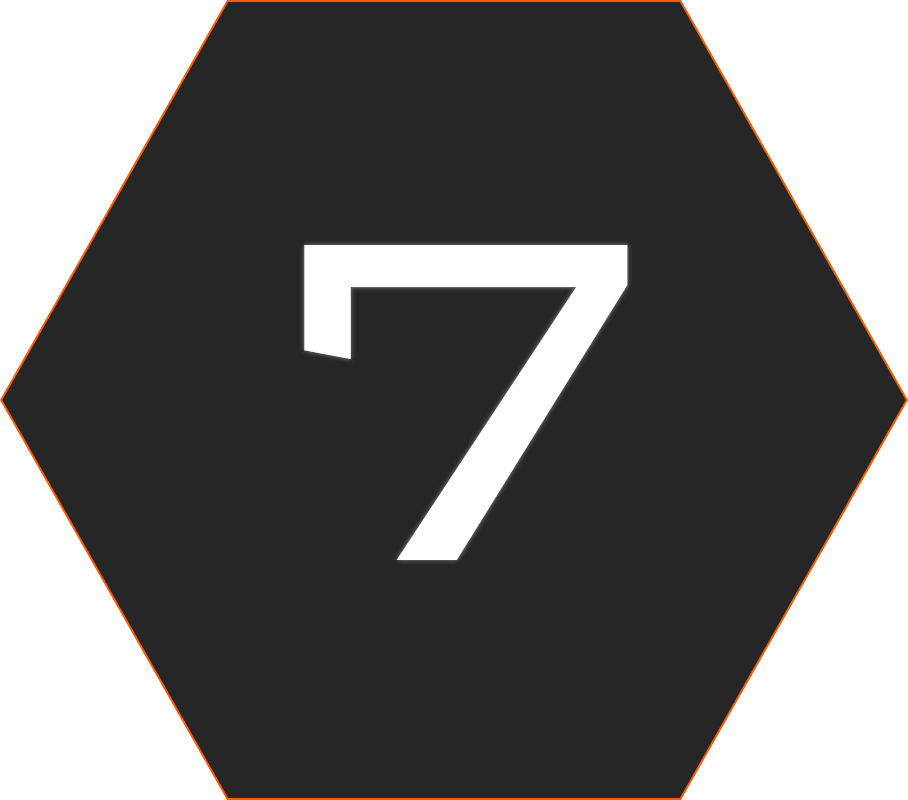
<style>
.page{position:relative;width:908px;height:800px;background:#262626}
.page>*{position:absolute;margin:0}
.t1{font:600px "BankGothicBT-Light";color:#ffffff}
</style>
<div class="page">
<p class="t1" style="left:304px;top:245px;width:324px;height:315px">7</p>
</div>
